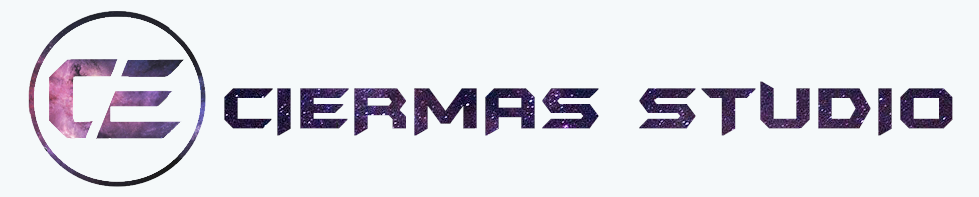
<style>
.page{position:relative;width:979px;height:197px;background:#f5f9fa}
.page>*{position:absolute;margin:0}
.t1{font:66.7px "BatmanForeverAlternate";font-weight:bold}
</style>
<div class="page">
<p class="t1" style="left:224px;top:81px;width:729px;height:55px">CIERMAS STUDIO</p>
</div>
